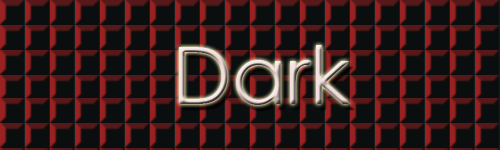
<style>
.page{position:relative;width:500px;height:150px;background:#0a0e0e}
.page>*{position:absolute;margin:0}
.t1{font:80px "CenturyGothic"}
</style>
<div class="page">
<p class="t1" style="left:179px;top:45px;width:172px;height:60px">Dark</p>
</div>
